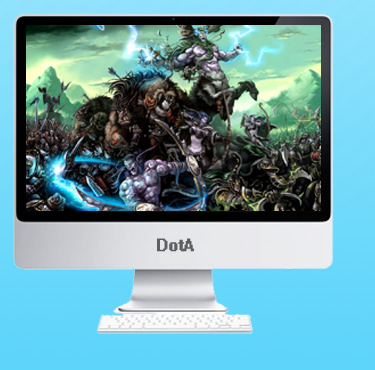
<style>
.page{position:relative;width:375px;height:370px}
.page>*{position:absolute;margin:0}
.t1{font:20px "System";letter-spacing:0.002em;color:#5e5e5e;font-weight:bold}
</style>
<div class="page">
<p class="t1" style="left:157px;top:238px;width:37px;height:14px">DotA</p>
</div>
